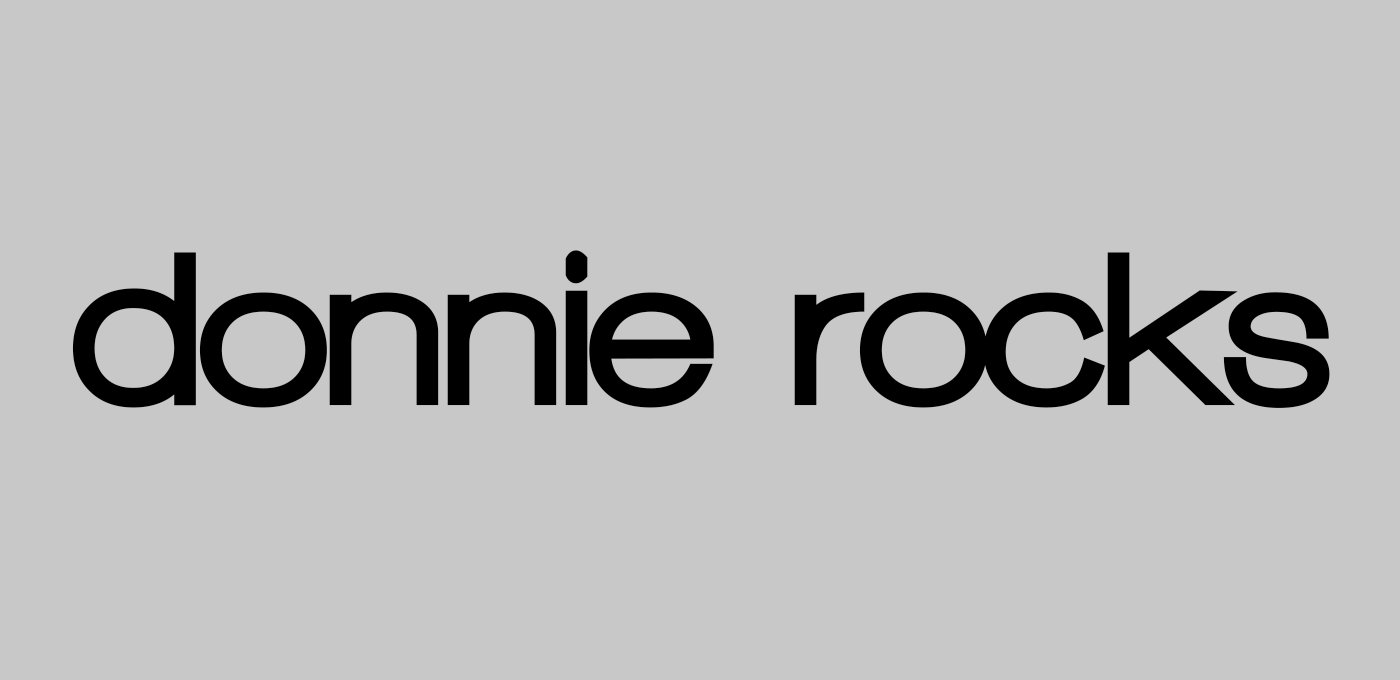
<style>
.page{position:relative;width:1400px;height:680px;background:#c9c8c8}
.page>*{position:absolute;margin:0}
.t1{font:225px "WalkwayBlack";color:#000000}
</style>
<div class="page">
<p class="t1" style="left:72px;top:250px;width:1258px;height:158px">donnie rocks</p>
</div>
